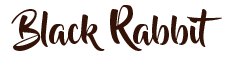
<style>
.page{position:relative;width:225px;height:60px;background:#ffffff}
.page>*{position:absolute;margin:0}
.t1{font:37.5px "BeyondTheMountains";color:#331308}
</style>
<div class="page">
<p class="t1" style="left:11px;top:5px;width:211px;height:46px">Black Rabbit</p>
</div>
